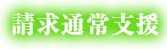
<style>
.page{position:relative;width:167px;height:49px}
.page>*{position:absolute;margin:0}
.t1{font:24px "RyuminPr6N-ExBold";color:#ffffff;font-weight:bold}
</style>
<div class="page">
<p class="t1" style="left:11px;top:12px;width:148px;height:24px">請求通常支援</p>
</div>
